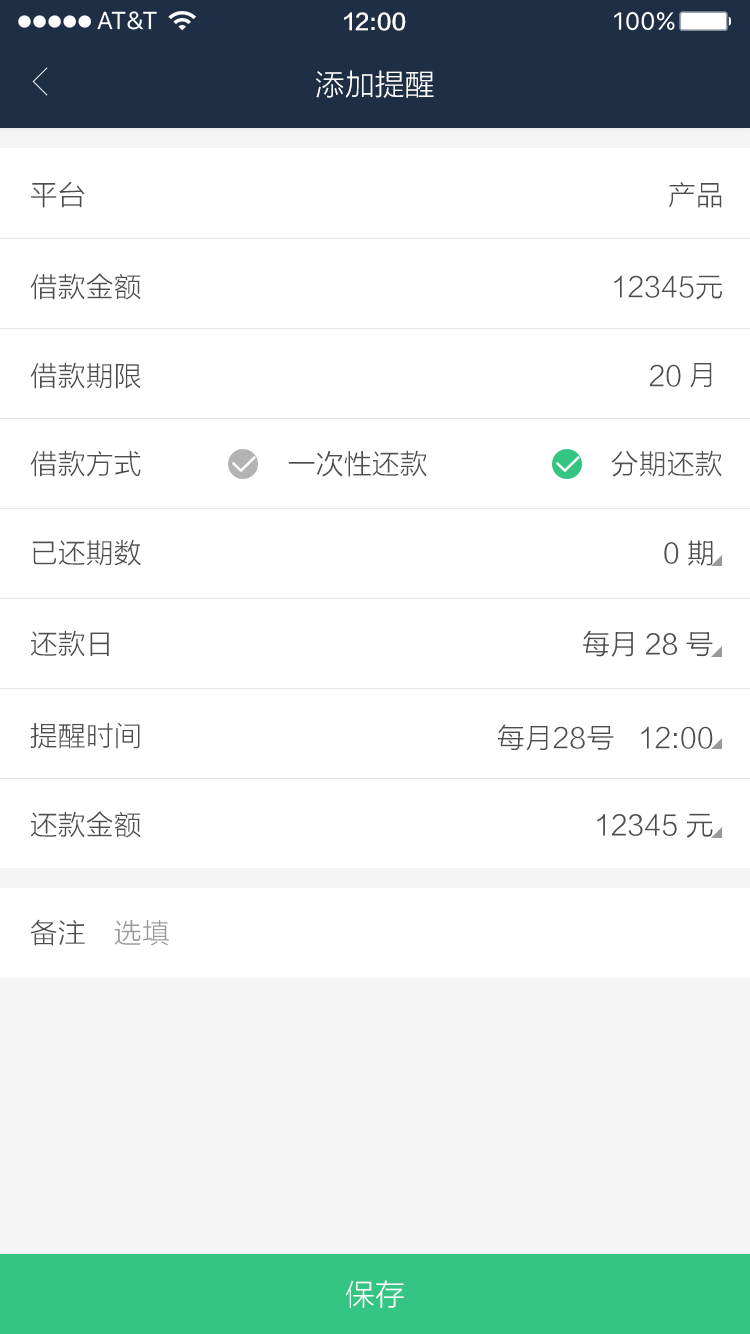
<style>
.page{position:relative;width:750px;height:1334px;background:#ffffff}
.page>*{position:absolute;margin:0}
.t1{font:22px "FZLTZHK--GBK1-0";color:#ffffff}
.t2{font:30px "FZLTXHK";color:#ffffff}
.t3{font:28px "FZLTXHK";color:#4d4d4d}
.t4{font:28px "FZLTXHK";color:#999999}
</style>
<div class="page">
<p class="t1" style="left:344px;top:12px;width:62px;height:19px">12:00</p>
<p class="t2" style="left:316px;top:70px;width:118px;height:28px">添加提醒</p>
<p class="t3" style="left:31px;top:181px;width:54px;height:27px">平台</p>
<p class="t3" style="left:669px;top:182px;width:53px;height:26px">产品</p>
<p class="t3" style="left:30px;top:273px;width:111px;height:27px">借款金额</p>
<p class="t3" style="left:614px;top:275px;width:108px;height:25px">12345元</p>
<p class="t3" style="left:30px;top:362px;width:111px;height:27px">借款期限</p>
<p class="t3" style="left:649px;top:364px;width:32px;height:23px">20</p>
<p class="t3" style="left:690px;top:363px;width:22px;height:25px">月</p>
<p class="t3" style="left:30px;top:450px;width:111px;height:27px">借款方式</p>
<p class="t3" style="left:288px;top:450px;width:139px;height:27px">一次性还款</p>
<p class="t3" style="left:611px;top:450px;width:111px;height:27px">分期还款</p>
<p class="t3" style="left:32px;top:539px;width:109px;height:27px">已还期数</p>
<p class="t3" style="left:664px;top:540px;width:49px;height:26px">0期</p>
<p class="t3" style="left:31px;top:630px;width:78px;height:27px">还款日</p>
<p class="t3" style="left:583px;top:630px;width:130px;height:27px">每月28号</p>
<p class="t3" style="left:30px;top:722px;width:110px;height:27px">提醒时间</p>
<p class="t3" style="left:498px;top:724px;width:215px;height:27px">每月28号   12:00</p>
<p class="t3" style="left:31px;top:811px;width:110px;height:27px">还款金额</p>
<p class="t3" style="left:597px;top:813px;width:116px;height:25px">12345元</p>
<p class="t3" style="left:30px;top:919px;width:55px;height:27px">备注</p>
<p class="t4" style="left:114px;top:920px;width:55px;height:26px">选填</p>
<p class="t2" style="left:346px;top:1280px;width:58px;height:28px">保存</p>
</div>
